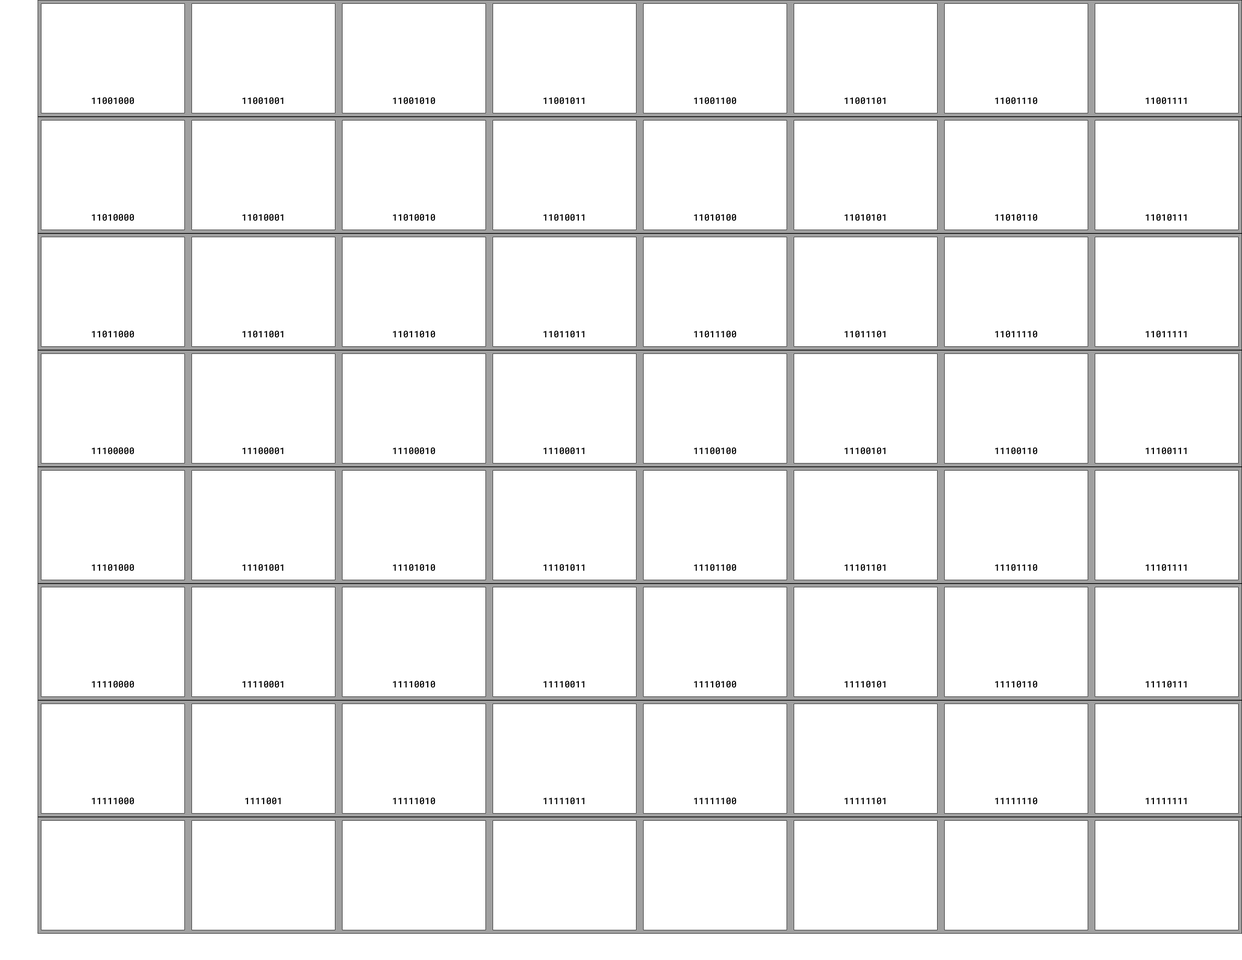
<style>
.page{position:relative;width:1242px;height:960px;background:#ffffff}
.page>*{position:absolute;margin:0}
.t1{font:9px "RobotoMono-Medium";color:#000000}
</style>
<div class="page">
<p class="t1" style="left:92px;top:97px;width:42px;height:7px">11001000</p>
<p class="t1" style="left:242px;top:97px;width:41px;height:7px">11001001</p>
<p class="t1" style="left:393px;top:97px;width:42px;height:7px">11001010</p>
<p class="t1" style="left:544px;top:97px;width:41px;height:7px">11001011</p>
<p class="t1" style="left:694px;top:97px;width:42px;height:7px">11001100</p>
<p class="t1" style="left:845px;top:97px;width:41px;height:7px">11001101</p>
<p class="t1" style="left:995px;top:97px;width:42px;height:7px">11001110</p>
<p class="t1" style="left:1146px;top:97px;width:41px;height:7px">11001111</p>
<p class="t1" style="left:92px;top:214px;width:42px;height:7px">11010000</p>
<p class="t1" style="left:242px;top:214px;width:41px;height:7px">11010001</p>
<p class="t1" style="left:393px;top:214px;width:42px;height:7px">11010010</p>
<p class="t1" style="left:544px;top:214px;width:41px;height:7px">11010011</p>
<p class="t1" style="left:694px;top:214px;width:42px;height:7px">11010100</p>
<p class="t1" style="left:845px;top:214px;width:41px;height:7px">11010101</p>
<p class="t1" style="left:995px;top:214px;width:42px;height:7px">11010110</p>
<p class="t1" style="left:1146px;top:214px;width:41px;height:7px">11010111</p>
<p class="t1" style="left:92px;top:331px;width:42px;height:7px">11011000</p>
<p class="t1" style="left:242px;top:331px;width:41px;height:7px">11011001</p>
<p class="t1" style="left:393px;top:331px;width:42px;height:7px">11011010</p>
<p class="t1" style="left:544px;top:331px;width:41px;height:7px">11011011</p>
<p class="t1" style="left:694px;top:331px;width:42px;height:7px">11011100</p>
<p class="t1" style="left:845px;top:331px;width:41px;height:7px">11011101</p>
<p class="t1" style="left:995px;top:331px;width:42px;height:7px">11011110</p>
<p class="t1" style="left:1146px;top:331px;width:41px;height:7px">11011111</p>
<p class="t1" style="left:92px;top:447px;width:42px;height:7px">11100000</p>
<p class="t1" style="left:242px;top:447px;width:41px;height:7px">11100001</p>
<p class="t1" style="left:393px;top:447px;width:42px;height:7px">11100010</p>
<p class="t1" style="left:544px;top:447px;width:41px;height:7px">11100011</p>
<p class="t1" style="left:694px;top:447px;width:42px;height:7px">11100100</p>
<p class="t1" style="left:845px;top:447px;width:41px;height:7px">11100101</p>
<p class="t1" style="left:995px;top:447px;width:42px;height:7px">11100110</p>
<p class="t1" style="left:1146px;top:447px;width:41px;height:7px">11100111</p>
<p class="t1" style="left:92px;top:564px;width:42px;height:7px">11101000</p>
<p class="t1" style="left:242px;top:564px;width:41px;height:7px">11101001</p>
<p class="t1" style="left:393px;top:564px;width:42px;height:7px">11101010</p>
<p class="t1" style="left:544px;top:564px;width:41px;height:7px">11101011</p>
<p class="t1" style="left:694px;top:564px;width:42px;height:7px">11101100</p>
<p class="t1" style="left:845px;top:564px;width:41px;height:7px">11101101</p>
<p class="t1" style="left:995px;top:564px;width:42px;height:7px">11101110</p>
<p class="t1" style="left:1146px;top:564px;width:41px;height:7px">11101111</p>
<p class="t1" style="left:92px;top:681px;width:42px;height:7px">11110000</p>
<p class="t1" style="left:242px;top:681px;width:41px;height:7px">11110001</p>
<p class="t1" style="left:393px;top:681px;width:42px;height:7px">11110010</p>
<p class="t1" style="left:544px;top:681px;width:41px;height:7px">11110011</p>
<p class="t1" style="left:694px;top:681px;width:42px;height:7px">11110100</p>
<p class="t1" style="left:845px;top:681px;width:41px;height:7px">11110101</p>
<p class="t1" style="left:995px;top:681px;width:42px;height:7px">11110110</p>
<p class="t1" style="left:1146px;top:681px;width:41px;height:7px">11110111</p>
<p class="t1" style="left:92px;top:797px;width:42px;height:7px">11111000</p>
<p class="t1" style="left:245px;top:797px;width:36px;height:7px">1111001</p>
<p class="t1" style="left:393px;top:797px;width:42px;height:7px">11111010</p>
<p class="t1" style="left:544px;top:797px;width:41px;height:7px">11111011</p>
<p class="t1" style="left:694px;top:797px;width:42px;height:7px">11111100</p>
<p class="t1" style="left:845px;top:797px;width:41px;height:7px">11111101</p>
<p class="t1" style="left:995px;top:797px;width:42px;height:7px">11111110</p>
<p class="t1" style="left:1146px;top:797px;width:41px;height:7px">11111111</p>
</div>
